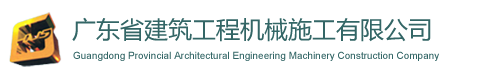
<style>
.page{position:relative;width:500px;height:80px;background:#ffffff}
.page>*{position:absolute;margin:0}
.t1{font:24px "MicrosoftYaHei";color:#336666}
.t2{font:10px "ArialMT";color:#336666}
</style>
<div class="page">
<p class="t1" style="left:72px;top:17px;width:359px;height:25px">广东省建筑工程机械施工有限公司</p>
<p class="t2" style="left:73px;top:51px;width:366px;height:10px">Guangdong Provincial Architectural Engineering Machinery Construction Company</p>
</div>
